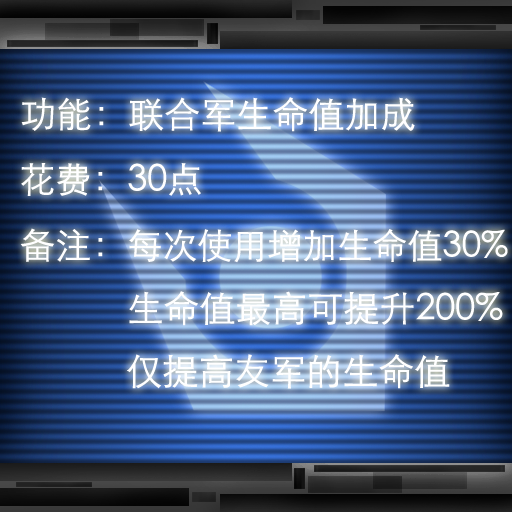
<style>
.page{position:relative;width:512px;height:512px}
.page>*{position:absolute;margin:0}
.t1{font:36px "STXihei";color:#ffffff}
.t2{font:35px "STXihei";color:#ffffff}
</style>
<div class="page">
<p class="t1" style="left:21px;top:97px;width:394px;height:35px">功能：联合军生命值加成</p>
<p class="t1" style="left:21px;top:163px;width:180px;height:33px">花费：30点</p>
<p class="t1" style="left:20px;top:228px;width:488px;height:161px">备注：<span class="t2">每次使用增加生命值30%<br></span>            生命值最高可提升200%<br>            仅提高友军的生命值</p>
</div>
